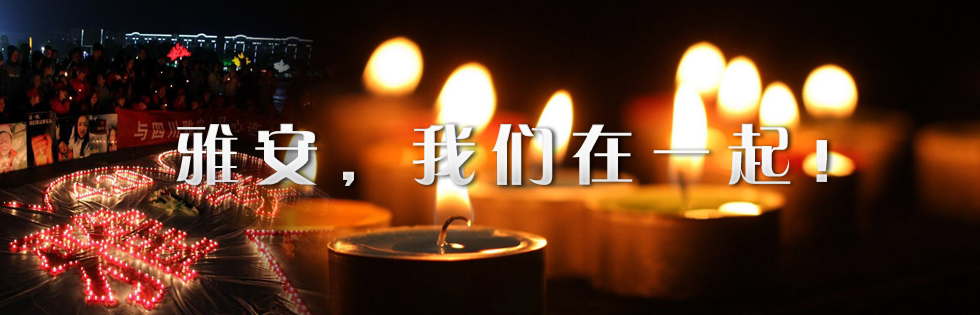
<style>
.page{position:relative;width:980px;height:315px}
.page>*{position:absolute;margin:0}
.t1{font:65.7px "FZCQJW--GB1-0";letter-spacing:0.2em;color:#ffffff}
</style>
<div class="page">
<p class="t1" style="left:176px;top:123px;width:651px;height:63px">雅安，我们在一起！</p>
</div>
